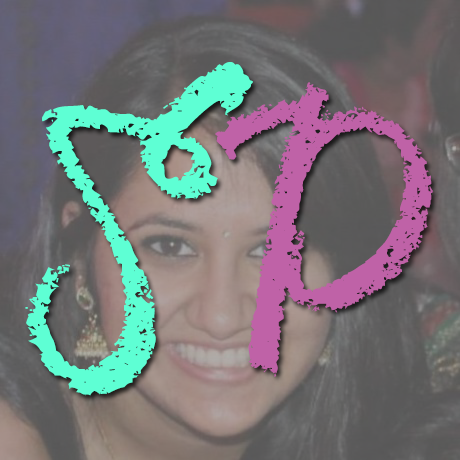
<style>
.page{position:relative;width:460px;height:460px}
.page>*{position:absolute;margin:0}
.t1{font:319.3px "CoalhandLukeTRIAL";letter-spacing:0.015em;color:#5effd4}
.t2{font:319.3px "CoalhandLukeTRIAL";letter-spacing:0.015em;color:#bf62a7}
</style>
<div class="page">
<p class="t1" style="left:25px;top:62px;width:409px;height:334px">S<span class="t2">P</span></p>
</div>
